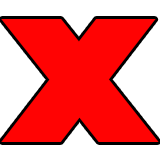
<style>
.page{position:relative;width:160px;height:160px;background:#ff0303}
.page>*{position:absolute;margin:0}
.t1{font:165px "GillSans-UltraBold";color:#ff0303}
</style>
<div class="page">
<p class="t1" style="left:1px;top:19px;width:158px;height:123px">X</p>
</div>
